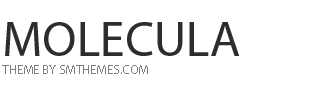
<style>
.page{position:relative;width:310px;height:104px;background:#ffffff}
.page>*{position:absolute;margin:0}
.t1{font:50px "MyriadPro-Regular";color:#2d2d2d;text-transform:uppercase}
.t2{font:13px "MyriadPro-Regular";color:#7d7d7d;text-transform:uppercase}
</style>
<div class="page">
<p class="t1" style="left:5px;top:22px;width:235px;height:34px">Molecula</p>
<p class="t2" style="left:2px;top:65px;width:146px;height:9px">Theme by smthemes.com</p>
</div>
